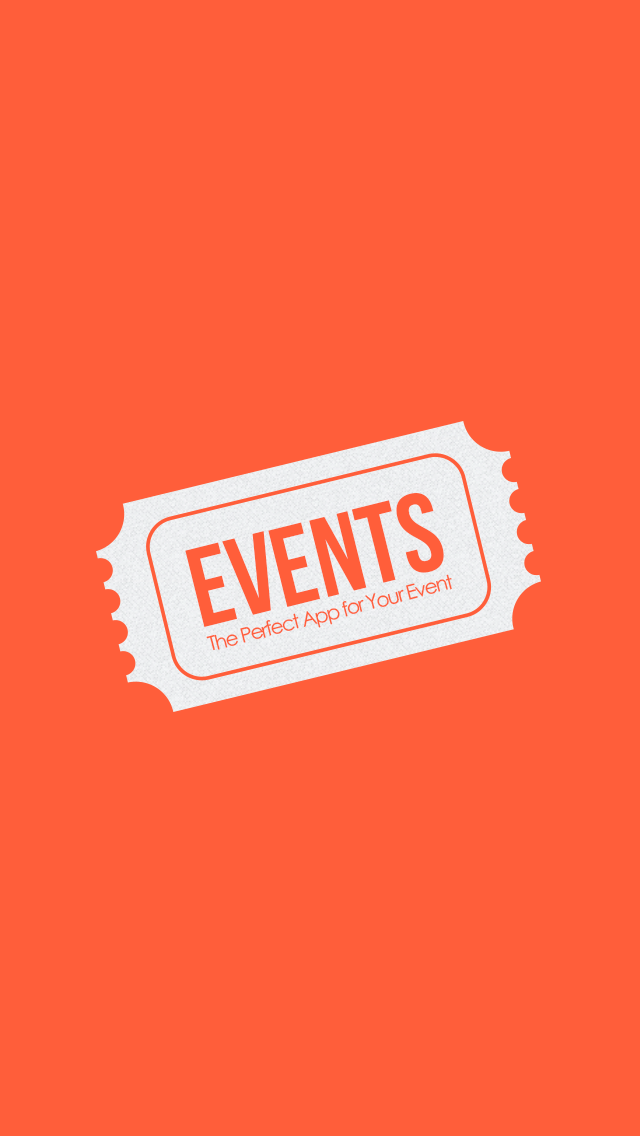
<style>
.page{position:relative;width:640px;height:1136px;background:#ff5e3a}
.page>*{position:absolute;margin:0}
.t1{font:112.2px "BebasNeue";color:#ff5e3a}
.t2{font:20px "CenturyGothic";letter-spacing:-0.075em;color:#ff5e3a}
</style>
<div class="page">
<p class="t1" style="left:185px;top:493px;width:259px;height:134px;rotate:-14deg">EVENTS</p>
<p class="t2" style="left:206px;top:574px;width:246px;height:77px;rotate:-15deg">The Perfect App for Your Event</p>
</div>
